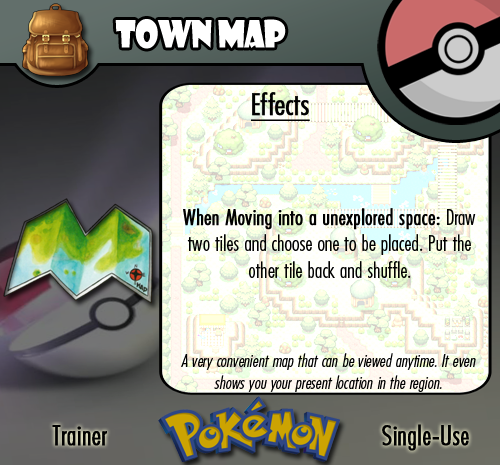
<style>
.page{position:relative;width:500px;height:465px}
.page>*{position:absolute;margin:0}
.t1{font:36.7px "ShowcardGothic-Reg";letter-spacing:-0.025em;color:#ffffff;scale:0.91 1}
.t2{font:22.2px "FuturaCondensedBQ-Light";color:#010101}
.t3{font:27.8px "FuturaCondensedBQ-Light";color:#010101;font-weight:bold}
.t4{font:30.6px "FuturaCondensedBQ-Light";color:#010101;font-weight:bold;text-decoration:underline}
.t5{font:22.2px "FuturaCondensedBQ-Light";color:#010101;font-weight:bold}
.t6{font:18.1px "FuturaCondensedBQ-Light";color:#010101;font-style:italic}
</style>
<div class="page">
<p class="t1" style="left:115px;top:19px;width:171px;height:30px">Town Map</p>
<p class="t2" style="left:183px;top:92px;width:293px;height:186px"><span class="t3">  </span><span class="t4">Effects<br><br><br><br><br><br><br></span><span class="t5">When Moving into a unexplored space: </span>Draw two tiles and choose one to be placed. Put the other tile back and shuffle.</p>
<p class="t6" style="left:181px;top:353px;width:295px;height:39px;text-align:center">A very convenient map that can be viewed anytime. It even shows you your present location in the region.</p>
<p class="t3" style="left:52px;top:425px;width:55px;height:21px">Trainer</p>
<p class="t3" style="left:382px;top:424px;width:87px;height:27px">Single-Use</p>
</div>
